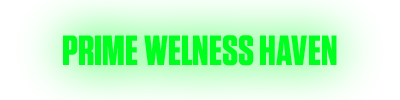
<style>
.page{position:relative;width:400px;height:100px}
.page>*{position:absolute;margin:0}
.t1{font:42.3px "Tungsten-Bold";color:#00ff1e}
</style>
<div class="page">
<p class="t1" style="left:63px;top:35px;width:274px;height:31px">PRIME WELNESS HAVEN</p>
</div>
